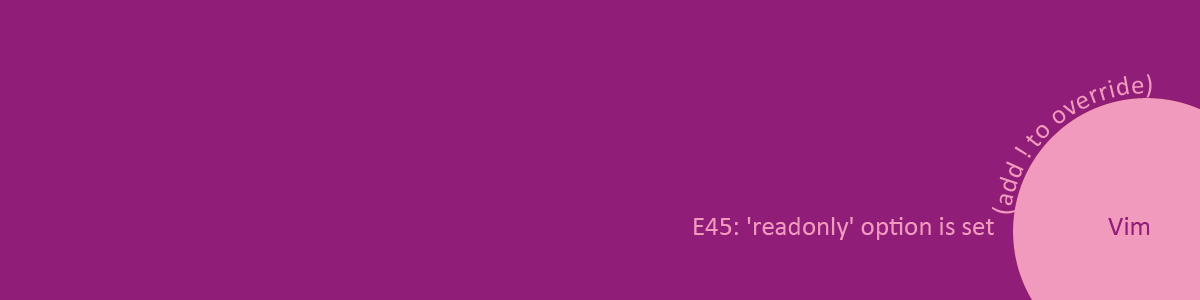
<style>
.page{position:relative;width:1200px;height:300px;background:#901d78}
.page>*{position:absolute;margin:0}
.t1{font:27px "Calibri";color:#f19abd}
.t2{font:27px "Calibri";color:#901d78}
</style>
<div class="page">
<p class="t1" style="left:694px;top:217px;width:300px;height:23px">E45: 'readonly' option is set</p>
<p class="t2" style="left:1108px;top:217px;width:42px;height:18px">Vim</p>
</div>
